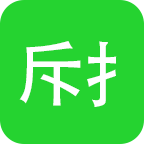
<style>
.page{position:relative;width:144px;height:144px;background:#25d330}
.page>*{position:absolute;margin:0}
.t1{font:72px "AdobeHeitiStd-Regular";color:#ffffff}
</style>
<div class="page">
<p class="t1" style="left:19px;top:41px;width:62px;height:65px">斥</p>
<p class="t1" style="left:87px;top:41px;width:30px;height:66px">扌</p>
</div>
